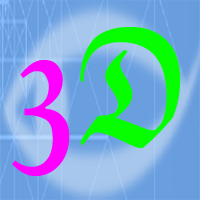
<style>
.page{position:relative;width:200px;height:200px}
.page>*{position:absolute;margin:0}
.t1{font:169.7px "TeXplusEF-Bold";color:#ff00ff;scale:0.68 1}
.t2{font:169.7px "TeXplusEF-Bold";color:#06ff00;scale:0.68 1}
</style>
<div class="page">
<p class="t1" style="left:12px;top:27px;width:169px;height:149px">3<span class="t2">D</span></p>
</div>
